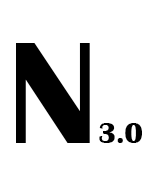
<style>
.page{position:relative;width:150px;height:187px;background:#ffffff}
.page>*{position:absolute;margin:0}
.t1{font:30px "BritannicBold";color:#000000}
.t2{font:150px "BritannicBold";color:#000000}
</style>
<div class="page">
<p class="t1" style="left:16px;top:43px;width:126px;height:100px"><span class="t2">N</span>3.0</p>
</div>
